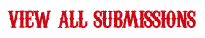
<style>
.page{position:relative;width:205px;height:38px;background:#ffffff}
.page>*{position:absolute;margin:0}
.t1{font:30px "CarnivaleeFreakshow";letter-spacing:-0.035em;color:#cc0814}
</style>
<div class="page">
<p class="t1" style="left:7px;top:10px;width:189px;height:18px">view all submissions</p>
</div>
